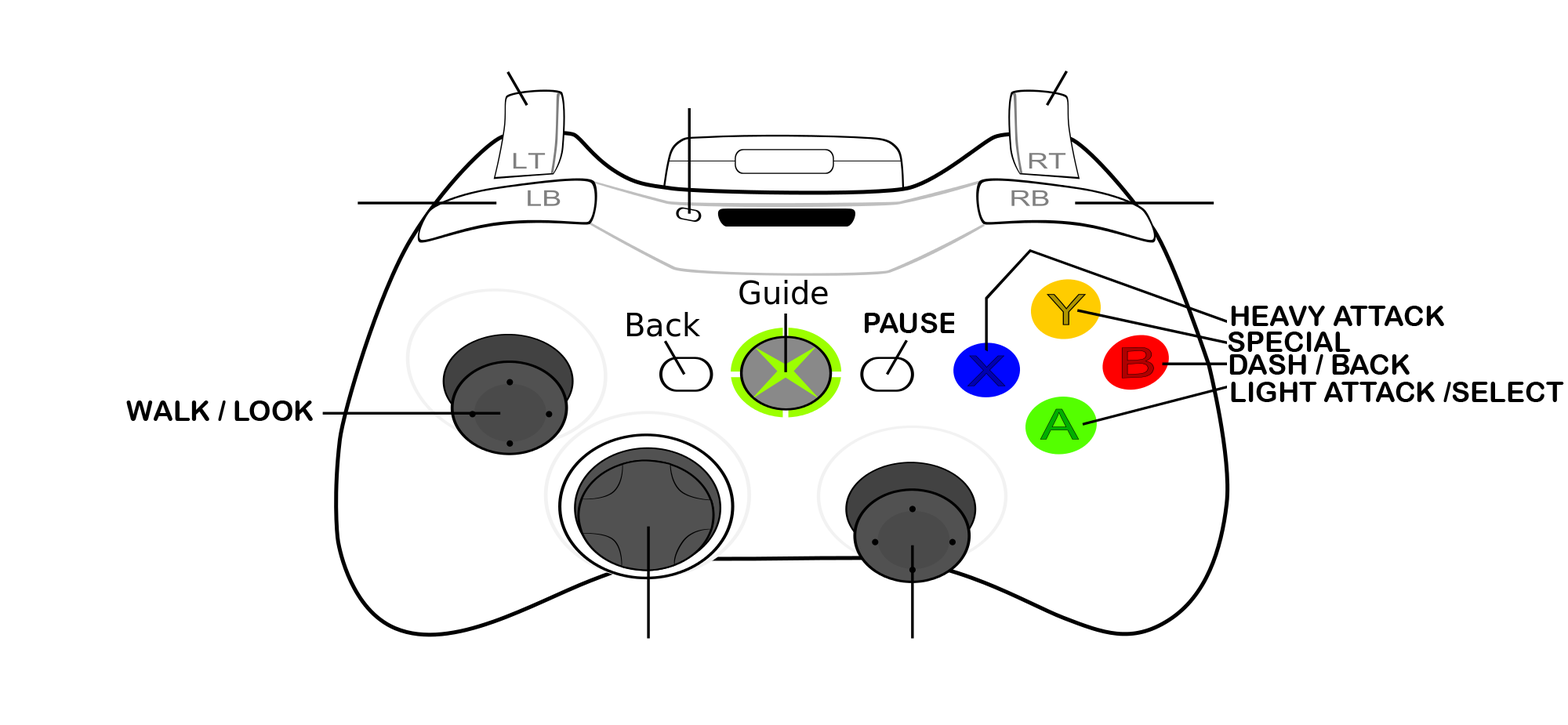
<style>
.page{position:relative;width:1568px;height:725px;background:#ffffff}
.page>*{position:absolute;margin:0}
.t1{font:28.2px "ArialRoundedMTBold";color:#000000}
</style>
<div class="page">
<p class="t1" style="left:1231px;top:306px;width:213px;height:20px">HEAVY ATTACK</p>
<p class="t1" style="left:864px;top:313px;width:92px;height:20px">PAUSE</p>
<p class="t1" style="left:1228px;top:332px;width:123px;height:20px">SPECIAL</p>
<p class="t1" style="left:1229px;top:354px;width:181px;height:21px">DASH / BACK</p>
<p class="t1" style="left:1231px;top:382px;width:333px;height:20px">LIGHT ATTACK /SELECT</p>
<p class="t1" style="left:126px;top:401px;width:187px;height:20px">WALK / LOOK</p>
</div>
